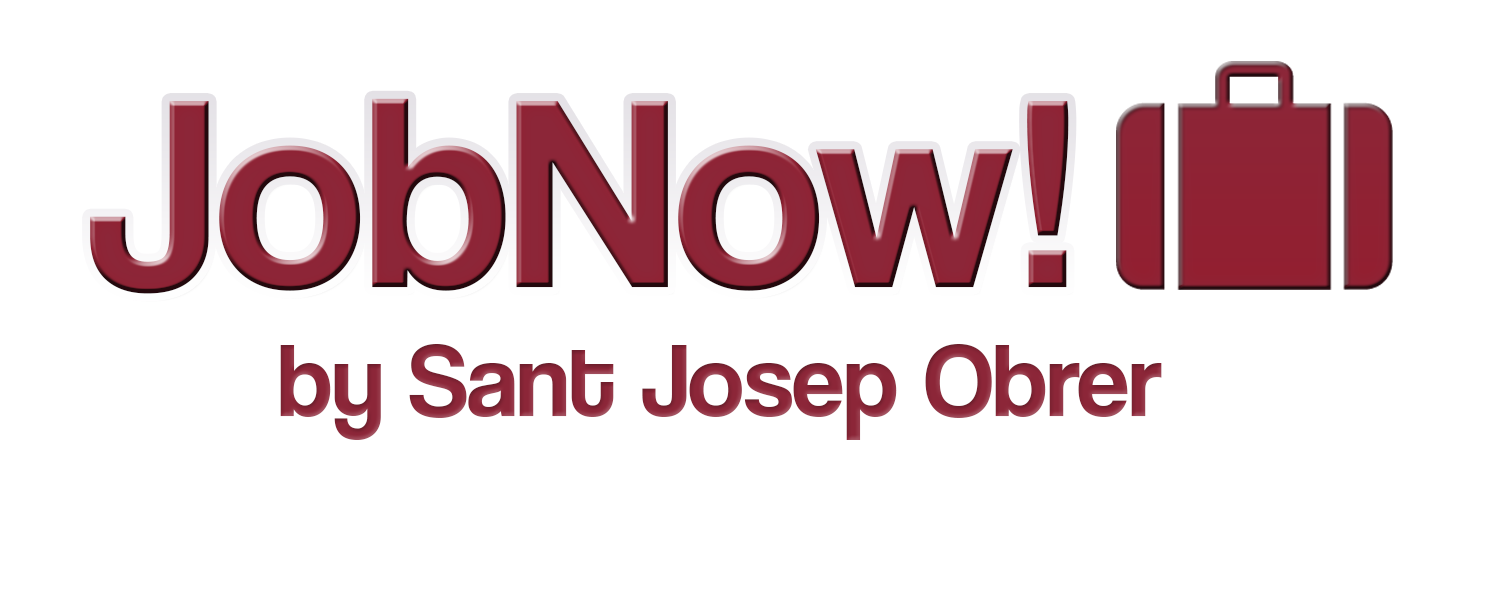
<style>
.page{position:relative;width:1500px;height:600px;background:#ffffff}
.page>*{position:absolute;margin:0}
.t1{font:279.8px "CoolveticaRg-Regular";color:#8d2537}
.t2{font:104.2px "CoolveticaRg-Regular";color:#8c2638}
</style>
<div class="page">
<p class="t1" style="left:90px;top:98px;width:979px;height:196px">JobNow!</p>
<p class="t2" style="left:280px;top:344px;width:882px;height:96px">by Sant Josep Obrer</p>
</div>
